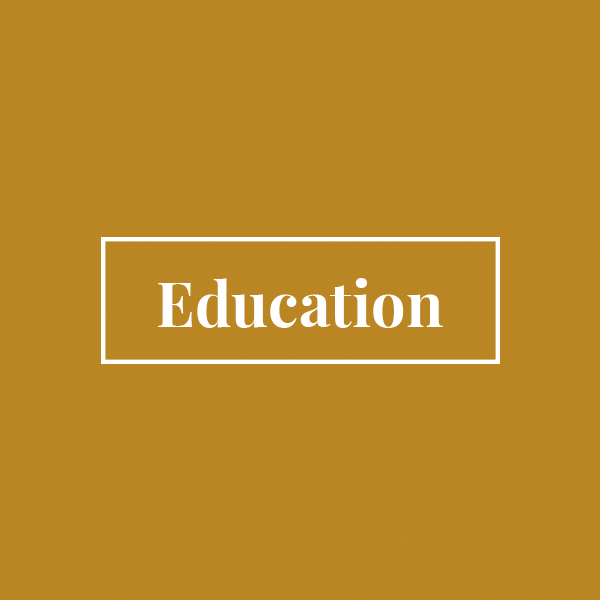
<style>
.page{position:relative;width:600px;height:600px;background:#ba8523}
.page>*{position:absolute;margin:0}
.t1{font:61.1px "PlayfairDisplay-Bold";color:#ffffff}
</style>
<div class="page">
<p class="t1" style="left:158px;top:278px;width:285px;height:50px">Education</p>
</div>
